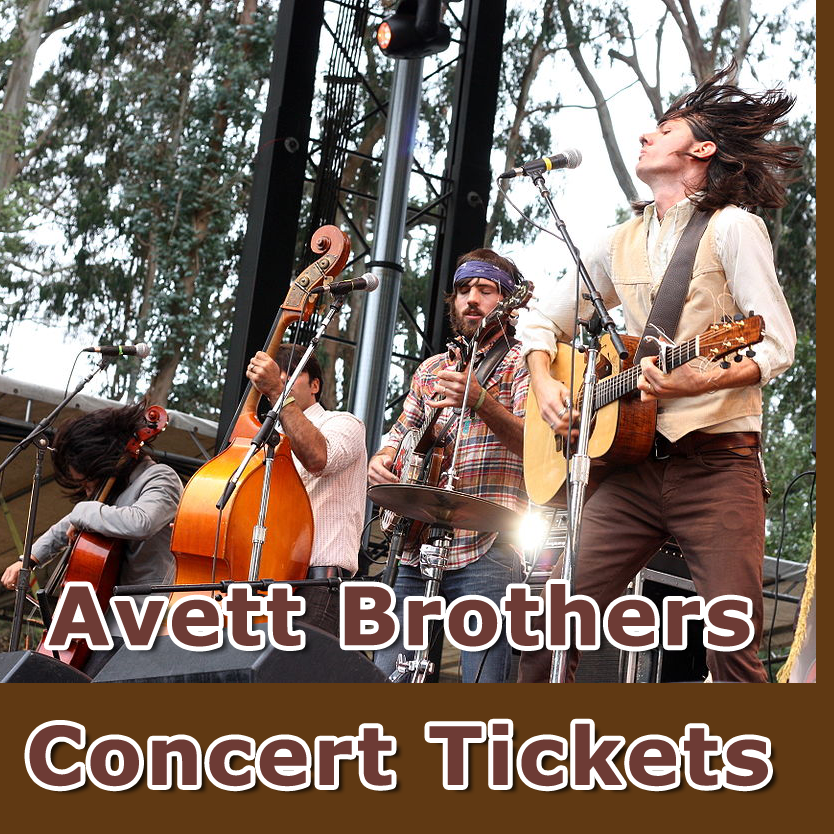
<style>
.page{position:relative;width:834px;height:834px}
.page>*{position:absolute;margin:0}
.t1{font:80px "Verdana-Bold";letter-spacing:0.018em;color:#6d3b35;font-weight:bold}
</style>
<div class="page">
<p class="t1" style="left:48px;top:584px;width:702px;height:63px">Avett Brothers</p>
<p class="t1" style="left:29px;top:723px;width:739px;height:64px">Concert Tickets</p>
</div>
